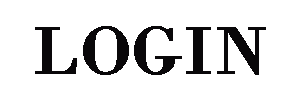
<style>
.page{position:relative;width:300px;height:100px;background:#ffffff}
.page>*{position:absolute;margin:0}
.t1{font:70px "BodoniMT";color:#090709;font-weight:bold}
</style>
<div class="page">
<p class="t1" style="left:35px;top:26px;width:231px;height:49px">LOGIN</p>
</div>
